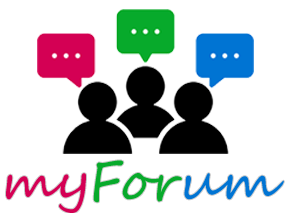
<style>
.page{position:relative;width:288px;height:213px;background:#ffffff}
.page>*{position:absolute;margin:0}
.t1{font:54px "SegoeScript";color:#07aa2b}
.t2{font:54px "SegoeScript";color:#d40054}
.t3{font:54px "SegoeScript";color:#0074d3}
</style>
<div class="page">
<p class="t1" style="left:6px;top:160px;width:278px;height:53px"><span class="t2">my</span>For<span class="t3">um</span></p>
</div>
